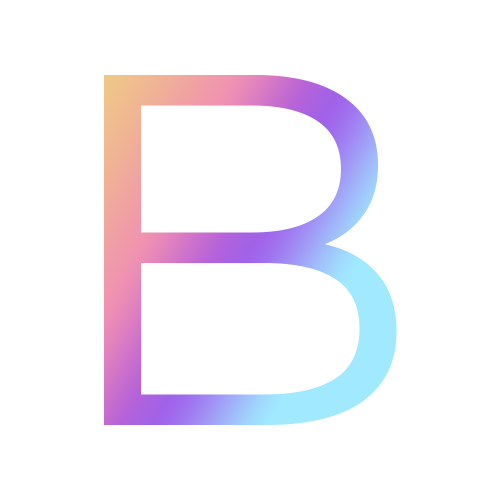
<style>
.page{position:relative;width:500px;height:500px;background:#ffffff}
.page>*{position:absolute;margin:0}
.t1{font:500px "Montserrat-Regular"}
</style>
<div class="page">
<p class="t1" style="left:104px;top:75px;width:293px;height:350px">B</p>
</div>
